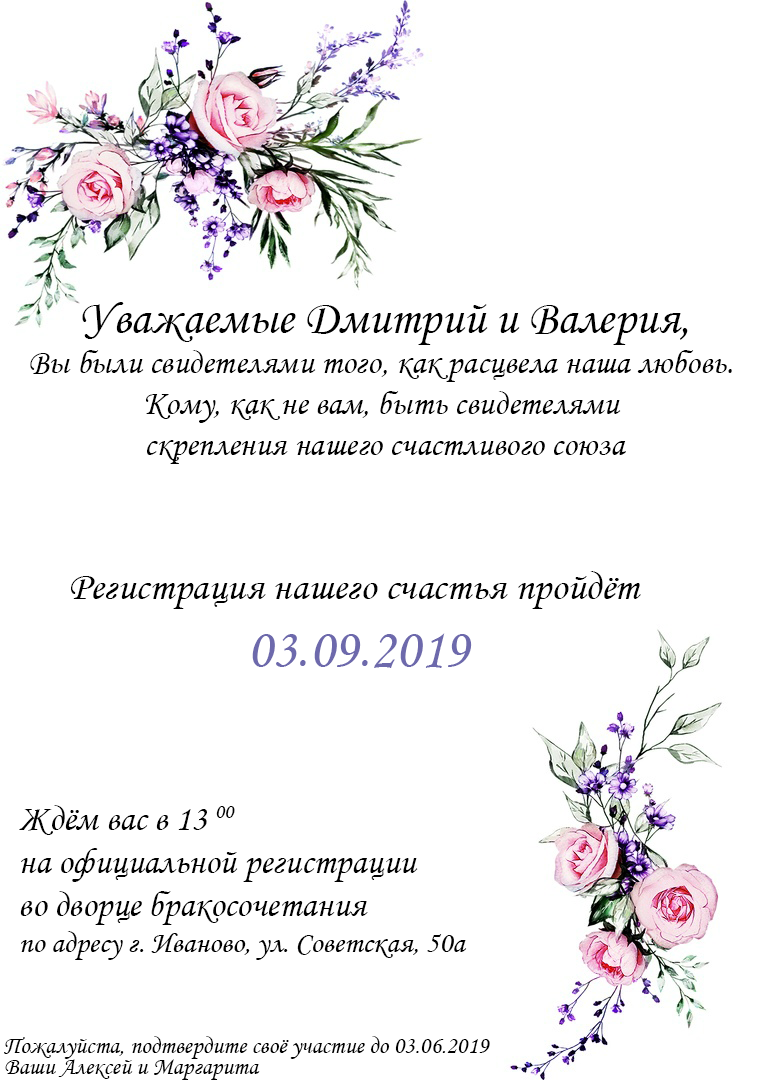
<style>
.page{position:relative;width:766px;height:1080px;background:#ffffff}
.page>*{position:absolute;margin:0}
.t1{font:34px "MonotypeCorsiva";color:#000000}
.t2{font:48px "MonotypeCorsiva";color:#000000}
.t3{font:40px "MonotypeCorsiva";color:#000000}
.t4{font:56px "MonotypeCorsiva";color:#6d69ac}
.t5{font:36px "MonotypeCorsiva";color:#000000}
.t6{font:30px "MonotypeCorsiva";color:#000000}
.t7{font:24px "MonotypeCorsiva";color:#000000}
</style>
<div class="page">
<p class="t1" style="left:30px;top:302px;width:702px;height:162px;text-align:center"><span class="t2">Уважаемые Дмитрий и Валерия,<br></span>Вы были свидетелями того, как расцвела наша любовь. <br>Кому, как не вам, быть свидетелями <br>скрепления нашего счастливого союза</p>
<p class="t3" style="left:71px;top:571px;width:570px;height:97px;text-align:center">Регистрация нашего счастья пройдёт <br><span class="t4">03.09.2019</span></p>
<p class="t5" style="left:19px;top:805px;width:448px;height:155px">Ждём вас в 13 00 <br>на официальной регистрации <br>во дворце бракосочетания<br><span class="t6">по адресу г. Иваново, ул. Советская, 50а</span></p>
<p class="t7" style="left:4px;top:1036px;width:486px;height:23px">Пожалуйста, подтвердите своё участие до 03.06.2019</p>
<p class="t7" style="left:5px;top:1059px;width:255px;height:21px">Ваши Алексей и Маргарита</p>
</div>
